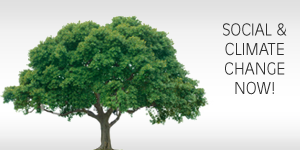
<style>
.page{position:relative;width:300px;height:150px}
.page>*{position:absolute;margin:0}
.t1{font:16.3px "AntiqueOliveStd-Light";color:#313131;text-transform:uppercase}
</style>
<div class="page">
<p class="t1" style="left:223px;top:23px;width:64px;height:72px;text-align:center">Social &amp; <br>Climate <br>Change <br>Now!</p>
</div>
